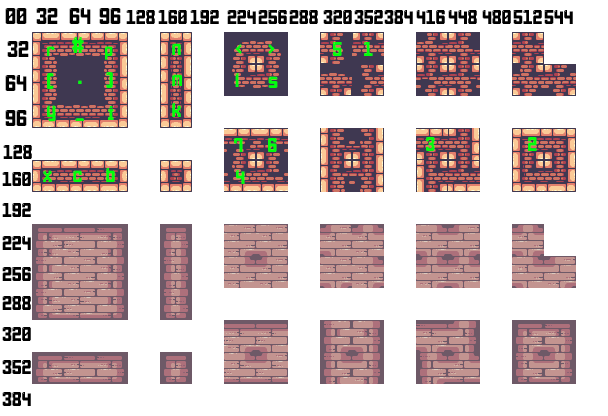
<style>
.page{position:relative;width:608px;height:416px;background:#ffffff}
.page>*{position:absolute;margin:0}
.t1{font:16px "LightPixel-7";color:#000000}
.t2{font:14px "LightPixel-7";color:#000000}
.t3{font:16px "LightPixel-7";color:#00ff0c}
.t4{font:12px "LightPixel-7";color:#00ff0c}
.t5{font:14px "LightPixel-7";color:#00ff0c}
</style>
<div class="page">
<p class="t1" style="left:5px;top:8px;width:22px;height:16px">00</p>
<p class="t1" style="left:36px;top:8px;width:22px;height:16px">32</p>
<p class="t1" style="left:69px;top:8px;width:22px;height:16px">64</p>
<p class="t1" style="left:99px;top:8px;width:22px;height:16px">96</p>
<p class="t2" style="left:126px;top:10px;width:29px;height:14px">128</p>
<p class="t2" style="left:158px;top:10px;width:29px;height:14px">160</p>
<p class="t2" style="left:190px;top:10px;width:29px;height:14px">192</p>
<p class="t2" style="left:227px;top:10px;width:29px;height:14px">224</p>
<p class="t2" style="left:258px;top:10px;width:29px;height:14px">256</p>
<p class="t2" style="left:289px;top:10px;width:29px;height:14px">288</p>
<p class="t2" style="left:323px;top:10px;width:29px;height:14px">320</p>
<p class="t2" style="left:354px;top:10px;width:29px;height:14px">352</p>
<p class="t2" style="left:384px;top:10px;width:29px;height:14px">384</p>
<p class="t2" style="left:416px;top:10px;width:29px;height:14px">416</p>
<p class="t2" style="left:448px;top:10px;width:29px;height:14px">448</p>
<p class="t2" style="left:482px;top:10px;width:29px;height:14px">480</p>
<p class="t2" style="left:513px;top:10px;width:29px;height:14px">512</p>
<p class="t2" style="left:544px;top:10px;width:29px;height:14px">544</p>
<p class="t1" style="left:7px;top:41px;width:22px;height:16px">32</p>
<p class="t3" style="left:72px;top:37px;width:12px;height:16px">#</p>
<p class="t4" style="left:47px;top:46px;width:8px;height:10px">r</p>
<p class="t4" style="left:105px;top:46px;width:8px;height:14px">p</p>
<p class="t5" style="left:172px;top:43px;width:9px;height:12px">n</p>
<p class="t5" style="left:235px;top:44px;width:7px;height:10px">&lt;</p>
<p class="t5" style="left:268px;top:44px;width:7px;height:10px">&gt;</p>
<p class="t5" style="left:333px;top:42px;width:9px;height:14px">5</p>
<p class="t5" style="left:364px;top:42px;width:9px;height:14px">1</p>
<p class="t1" style="left:5px;top:75px;width:22px;height:16px">64</p>
<p class="t3" style="left:47px;top:73px;width:7px;height:16px">[</p>
<p class="t3" style="left:106px;top:72px;width:7px;height:16px">]</p>
<p class="t5" style="left:172px;top:74px;width:10px;height:12px">m</p>
<p class="t5" style="left:235px;top:73px;width:4px;height:14px">l</p>
<p class="t5" style="left:268px;top:76px;width:10px;height:12px">s</p>
<p class="t3" style="left:78px;top:80px;width:4px;height:4px">.</p>
<p class="t1" style="left:5px;top:110px;width:22px;height:16px">96</p>
<p class="t5" style="left:47px;top:105px;width:9px;height:17px">y</p>
<p class="t5" style="left:108px;top:106px;width:6px;height:14px">i</p>
<p class="t5" style="left:172px;top:103px;width:9px;height:14px">k</p>
<p class="t5" style="left:75px;top:118px;width:9px;height:3px">_</p>
<p class="t5" style="left:426px;top:137px;width:9px;height:14px">3</p>
<p class="t5" style="left:528px;top:137px;width:9px;height:14px">2</p>
<p class="t2" style="left:3px;top:145px;width:29px;height:14px">128</p>
<p class="t5" style="left:234px;top:138px;width:9px;height:14px">7</p>
<p class="t5" style="left:268px;top:138px;width:9px;height:14px">6</p>
<p class="t2" style="left:2px;top:172px;width:29px;height:14px">160</p>
<p class="t5" style="left:43px;top:170px;width:9px;height:12px">x</p>
<p class="t5" style="left:73px;top:170px;width:9px;height:12px">c</p>
<p class="t5" style="left:106px;top:168px;width:9px;height:14px">b</p>
<p class="t5" style="left:236px;top:170px;width:9px;height:14px">4</p>
<p class="t2" style="left:2px;top:203px;width:29px;height:14px">192</p>
<p class="t2" style="left:2px;top:236px;width:29px;height:14px">224</p>
<p class="t2" style="left:2px;top:267px;width:29px;height:14px">256</p>
<p class="t2" style="left:2px;top:296px;width:29px;height:14px">288</p>
<p class="t2" style="left:2px;top:327px;width:29px;height:14px">320</p>
<p class="t2" style="left:2px;top:360px;width:29px;height:14px">352</p>
<p class="t2" style="left:2px;top:392px;width:29px;height:14px">384</p>
</div>
